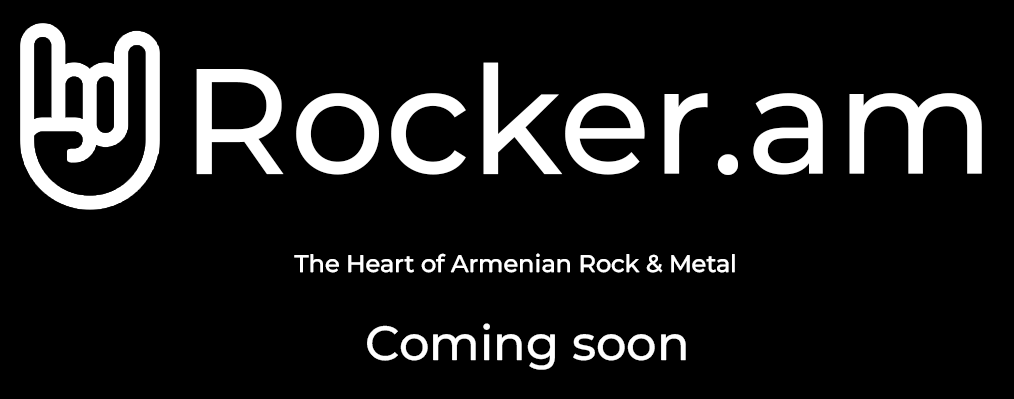
<style>
.page{position:relative;width:1014px;height:399px;background:#000000}
.page>*{position:absolute;margin:0}
.t1{font:24px/98px "Montserrat-Medium";color:#ffffff}
.t2{font:150px "Montserrat-Medium";color:#ffffff}
.t3{font:150px/98px "Montserrat-Medium";color:#ffffff}
.t4{font:48px/44px "Montserrat-Medium";color:#ffffff}
</style>
<div class="page">
<p class="t1" style="left:196px;top:62px;width:786px;height:308px;text-align:center"><span class="t2">Rocker</span><span class="t3">.am<br></span>                                               The Heart of Armenian Rock &amp; Metal<br><br>                                                          <span class="t4">Coming soon</span></p>
</div>
